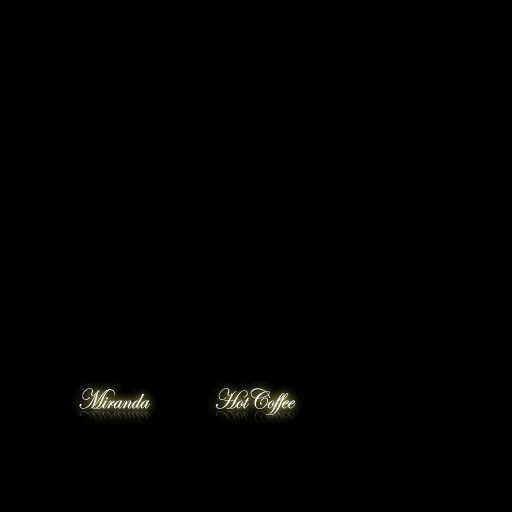
<style>
.page{position:relative;width:512px;height:512px;background:#000000}
.page>*{position:absolute;margin:0}
.t1{font:28.2px "EdwardianScrAltITCTT";color:#000000;scale:0.88 1}
</style>
<div class="page">
<p class="t1" style="left:79px;top:388px;width:217px;height:27px">Miranda               HotCoffee</p>
<p class="t1" style="left:79px;top:405px;width:217px;height:27px;opacity:0.6">Miranda               HotCoffee</p>
</div>
